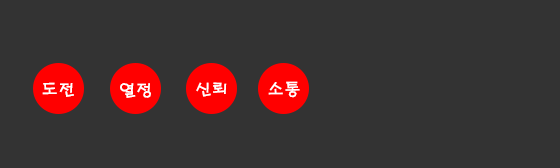
<style>
.page{position:relative;width:560px;height:168px;background:#333333}
.page>*{position:absolute;margin:0}
.t1{font:16.8px "H2porM";color:#ffffff}
</style>
<div class="page">
<p class="t1" style="left:42px;top:82px;width:32px;height:15px;text-align:center">도전ㅇㅇㅇ<br><br><br><br><br>ㄴㅇㄴ</p>
<p class="t1" style="left:120px;top:83px;width:31px;height:15px">열정</p>
<p class="t1" style="left:196px;top:82px;width:31px;height:15px">신뢰</p>
<p class="t1" style="left:268px;top:81px;width:32px;height:17px">소통</p>
</div>
